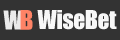
<style>
.page{position:relative;width:120px;height:40px;background:#333333}
.page>*{position:absolute;margin:0}
.t1{font:24px "Impact";letter-spacing:-0.025em;color:#ebebeb}
.t2{font:25px "Impact";letter-spacing:-0.025em;color:#fe8366}
.t3{font:24px "Impact";letter-spacing:-0.025em;color:#f7f7f7}
</style>
<div class="page">
<p class="t1" style="left:3px;top:10px;width:20px;height:20px">W</p>
<p class="t2" style="left:20px;top:10px;width:13px;height:20px">B</p>
<p class="t3" style="left:37px;top:10px;width:80px;height:20px">WiseBet</p>
</div>
